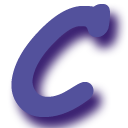
<style>
.page{position:relative;width:128px;height:128px;background:#ffffff}
.page>*{position:absolute;margin:0}
.t1{font:150px "ComicSansMS-Bold";color:#54539c;font-style:italic}
</style>
<div class="page">
<p class="t1" style="left:11px;top:4px;width:99px;height:113px">C</p>
</div>
